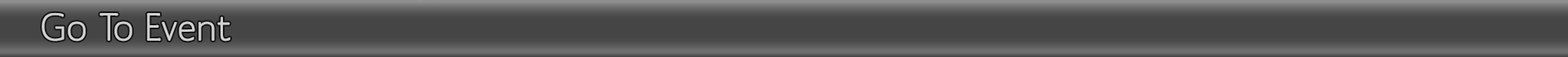
<style>
.page{position:relative;width:1568px;height:57px;background:#454546}
.page>*{position:absolute;margin:0}
.t1{font:39.2px "MankSans-Medium";color:#d2d0d0}
</style>
<div class="page">
<p class="t1" style="left:42px;top:12px;width:188px;height:30px">Go To Event</p>
</div>
